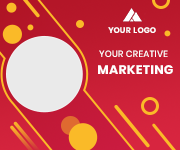
<style>
.page{position:relative;width:180px;height:150px}
.page>*{position:absolute;margin:0}
.t1{font:8px "Poppins-Bold";letter-spacing:0.025em;color:#ffffff}
.t2{font:9.1px "Poppins-Medium";letter-spacing:0.025em;color:#ffffff}
.t3{font:12.5px "Poppins-Bold";letter-spacing:0.025em;color:#ffffff}
</style>
<div class="page">
<p class="t1" style="left:108px;top:27px;width:48px;height:6px">YOUR LOGO</p>
<p class="t2" style="left:99px;top:50px;width:69px;height:7px">YOUR CREATIVE</p>
<p class="t3" style="left:98px;top:65px;width:75px;height:9px">MARKETING</p>
</div>
